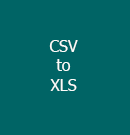
<style>
.page{position:relative;width:130px;height:135px;background:#006465}
.page>*{position:absolute;margin:0}
.t1{font:12px "Tahoma";color:#fcfcfa}
</style>
<div class="page">
<p class="t1" style="left:49px;top:40px;width:29px;height:51px;text-align:center">CSV<br>to<br>XLS</p>
</div>
